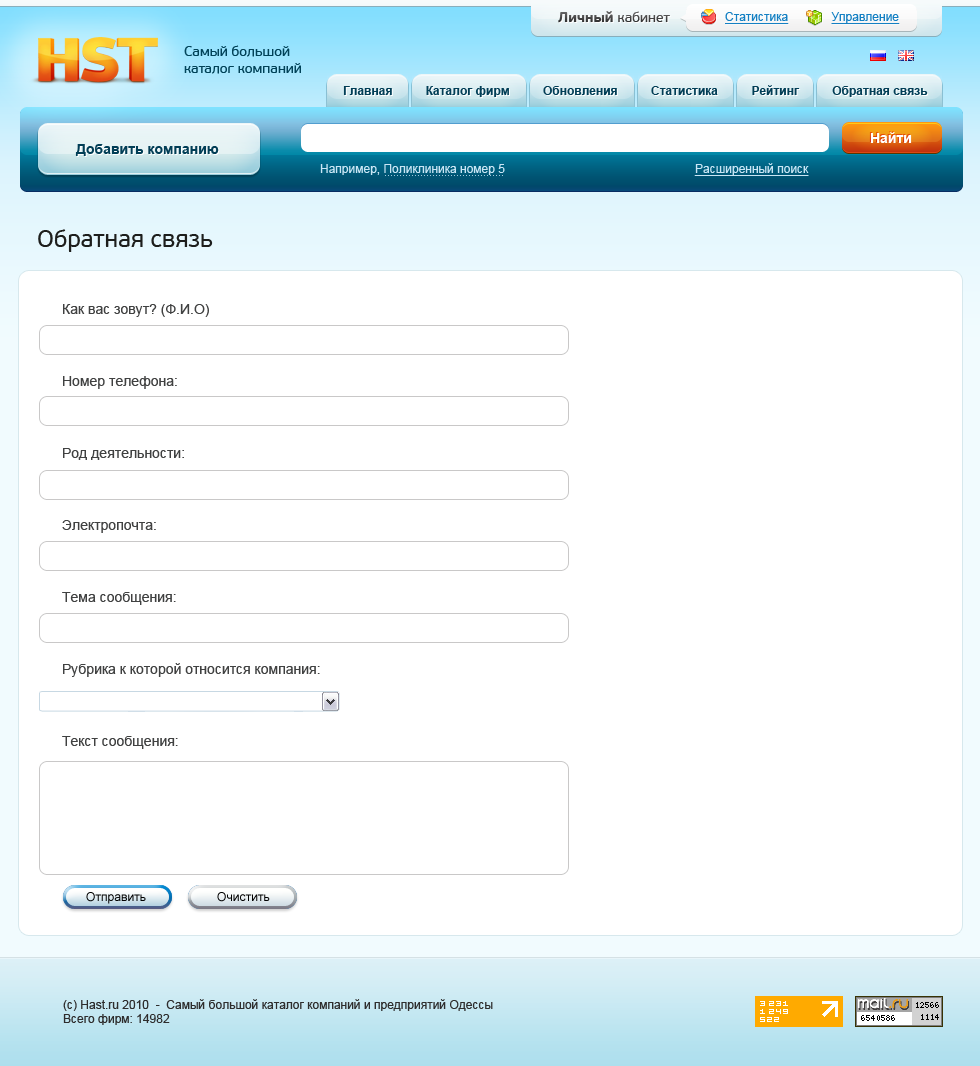
<style>
.page{position:relative;width:980px;height:1066px;background:#ffffff}
.page>*{position:absolute;margin:0}
.t1{font:14px "PFBeauSansPro-Regular";color:#424242}
.t2{font:14px "PFBeauSansPro-Bold";color:#424242}
.t3{font:12px "ArialMT";color:#1480c3;text-decoration:underline}
.t4{font:14px "PFBeauSansPro-Regular";color:#014258}
.t5{font:12px "Arial-BoldMT";color:#023e56}
.t6{font:14px "Arial-BoldMT";color:#ffffff}
.t7{font:14px "Arial-BoldMT";color:#023e56}
.t8{font:12px "ArialMT";color:#c9e6f5}
.t9{font:12px "ArialMT";color:#c9e6f5;text-decoration:underline}
.t10{font:24px "PFBeauSansPro-Regular";color:#1d1e1c}
.t11{font:14px/18px "ArialMT";color:#404141}
.t12{font:12px "ArialMT";color:#000000}
.t13{font:12px "ArialMT";color:#2e2d2d}
</style>
<div class="page">
<p class="t1" style="left:558px;top:11px;width:112px;height:12px"><span class="t2">Личный </span>кабинет</p>
<p class="t3" style="left:725px;top:12px;width:175px;height:12px">Статистика             Управление</p>
<p class="t4" style="left:184px;top:45px;width:117px;height:29px">Самый большой <br>каталог компаний</p>
<p class="t5" style="left:343px;top:85px;width:585px;height:12px">Главная          Каталог фирм          Обновления          Статистика          Рейтинг          Обратная связь</p>
<p class="t6" style="left:870px;top:132px;width:42px;height:11px">Найти</p>
<p class="t7" style="left:75px;top:144px;width:144px;height:12px">Добавить компанию</p>
<p class="t8" style="left:320px;top:163px;width:489px;height:13px">Например, Поликлиника номер 5                                                         <span class="t9">Расширенный поиск</span></p>
<p class="t10" style="left:38px;top:229px;width:175px;height:23px">Обратная связь</p>
<p class="t11" style="left:62px;top:304px;width:258px;height:445px">Как вас зовут? (Ф.И.О)<br><br><br><br>Номер телефона:<br><br><br><br>Род деятельности:<br><br><br><br>Электропочта:<br><br><br><br>Тема сообщения:<br><br><br><br>Рубрика к которой относится компания:<br><br><br><br>Текст сообщения:</p>
<p class="t12" style="left:86px;top:892px;width:60px;height:12px">Отправить</p>
<p class="t12" style="left:217px;top:892px;width:53px;height:10px">Очистить</p>
<p class="t13" style="left:63px;top:999px;width:430px;height:26px">(с) Hast.ru 2010  -  Самый большой каталог компаний и предприятий Одессы<br>Всего фирм: 14982</p>
</div>
